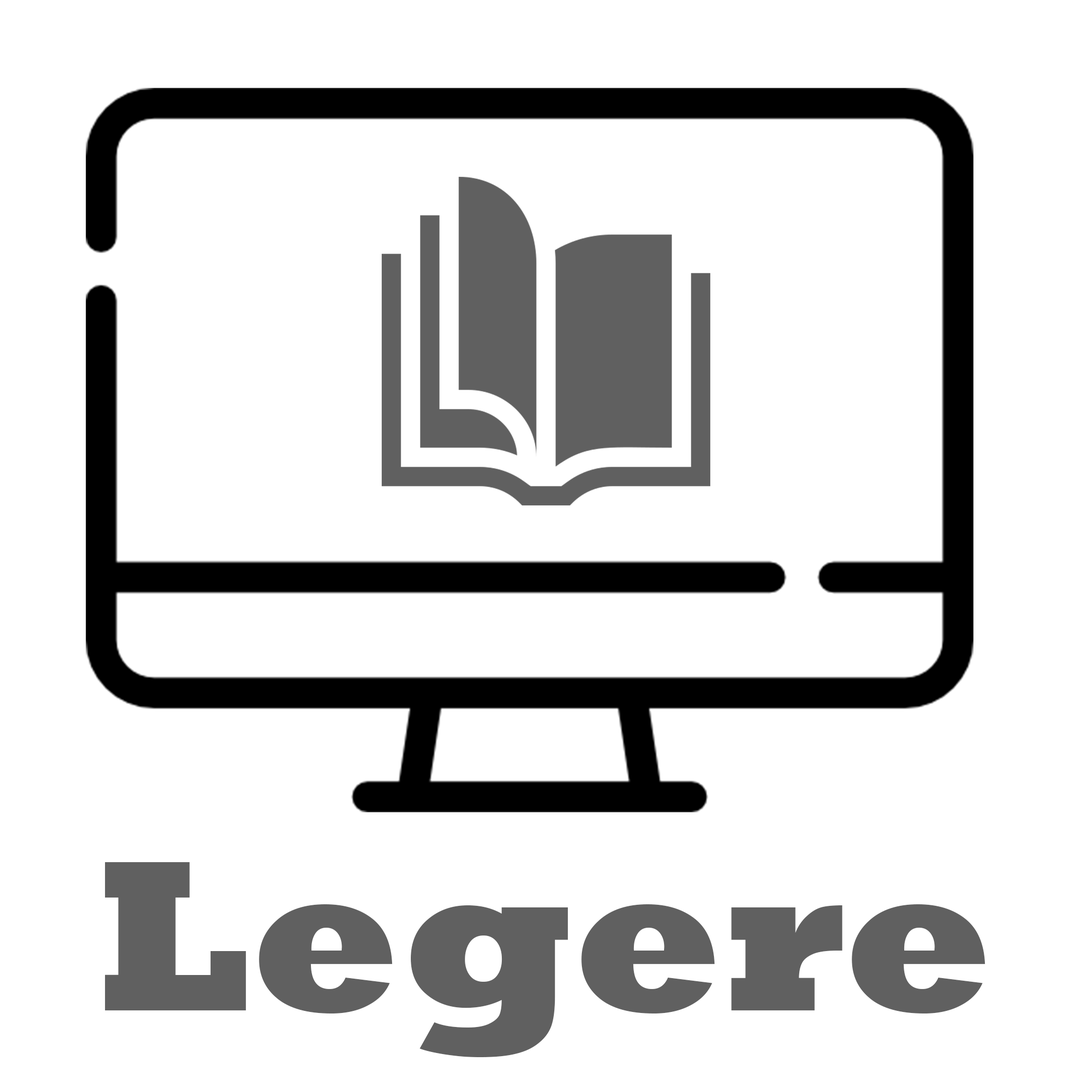
<style>
.page{position:relative;width:1092px;height:1092px;background:#ffffff}
.page>*{position:absolute;margin:0}
.t1{font:218px "Rockwell-ExtraBold";color:#606060}
</style>
<div class="page">
<p class="t1" style="left:105px;top:862px;width:880px;height:195px">Legere</p>
</div>
